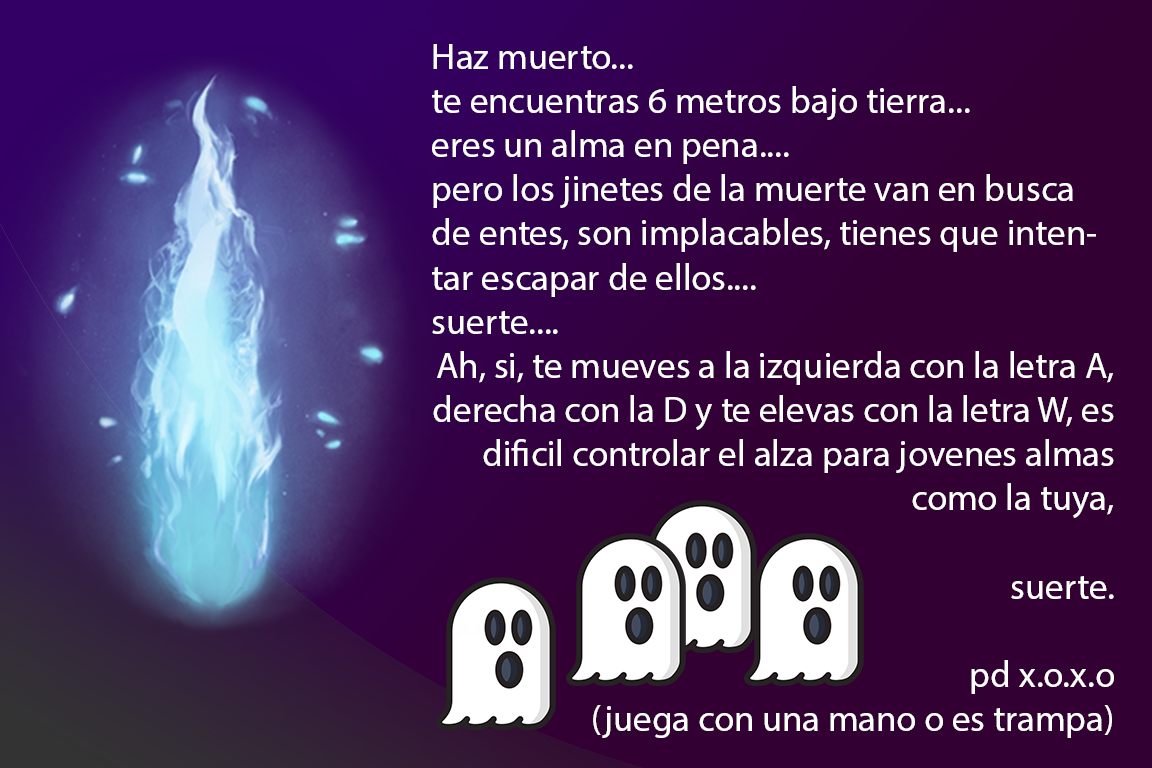
<style>
.page{position:relative;width:1152px;height:768px;background:#330033}
.page>*{position:absolute;margin:0}
.t1{font:36.8px "MyriadPro-Regular";color:#ffffff}
</style>
<div class="page">
<p class="t1" style="left:432px;top:44px;width:682px;height:694px">Haz muerto...<br>te encuentras 6 metros bajo tierra...<br>eres un alma en pena....<br>pero los jinetes de la muerte van en busca de entes, son implacables, tienes que intentar escapar de ellos....<br>suerte....<br>Ah, si, te mueves a la izquierda con la letra A, derecha con la D y te elevas con la letra W, es dificil controlar el alza para jovenes almas como la tuya,<br><br>suerte. <br><br>pd x.o.x.o <br>(juega con una mano o es trampa)<br><br>MUAHAHAHAHA!</p>
</div>
